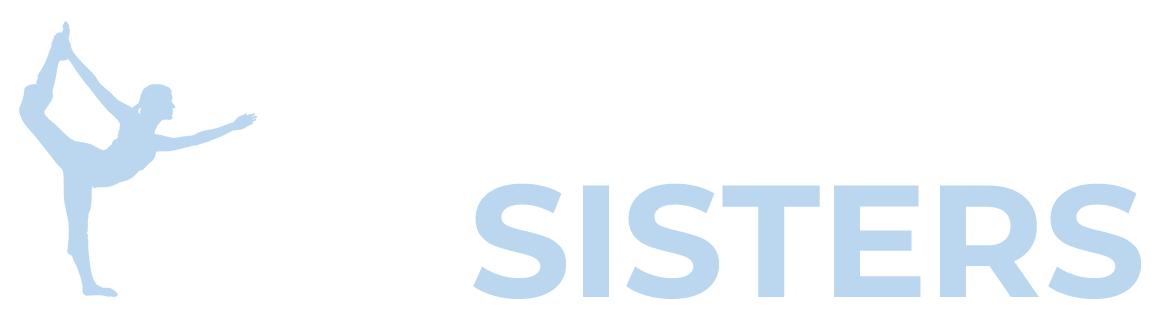
<style>
.page{position:relative;width:1167px;height:324px;background:#ffffff}
.page>*{position:absolute;margin:0}
.t1{font:159px "Montserrat-Bold";color:#bbd7ef;text-transform:uppercase}
.t2{font:159px "Montserrat-Bold";color:#ffffff;text-transform:uppercase}
</style>
<div class="page">
<p class="t1" style="left:142px;top:183px;width:999px;height:116px"><span class="t2">Sol</span>Sisters</p>
</div>
